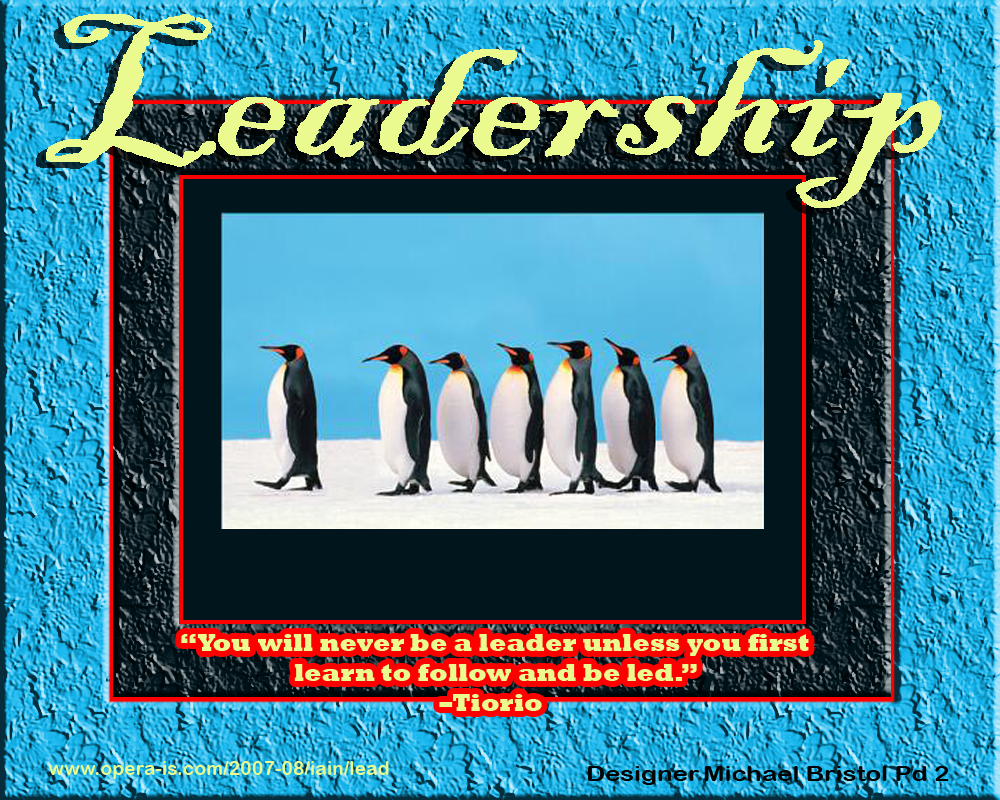
<style>
.page{position:relative;width:1000px;height:800px}
.page>*{position:absolute;margin:0}
.t1{font:25px "Rockwell-ExtraBold";color:#eafa8e}
.t2{font:19.4px "ArialRoundedMTBold";color:#eafa8e}
.t3{font:20.6px "ArialRoundedMTBold";color:#030303;scale:1.25 1}
.t4{font:20.6px "BlackadderITC-Regular";color:#030303;scale:1.25 1}
</style>
<div class="page">
<p class="t1" style="left:181px;top:634px;width:628px;height:77px;text-align:center">“You will never be a leader unless you first<br> learn to follow and be led.” <br>–Tiorio</p>
<p class="t2" style="left:48px;top:761px;width:341px;height:18px">www.opera-is.com/2007-08/iain/lead</p>
<p class="t3" style="left:588px;top:766px;width:361px;height:19px"><span class="t4">  </span> Designer Michael Bristol Pd 2</p>
</div>
